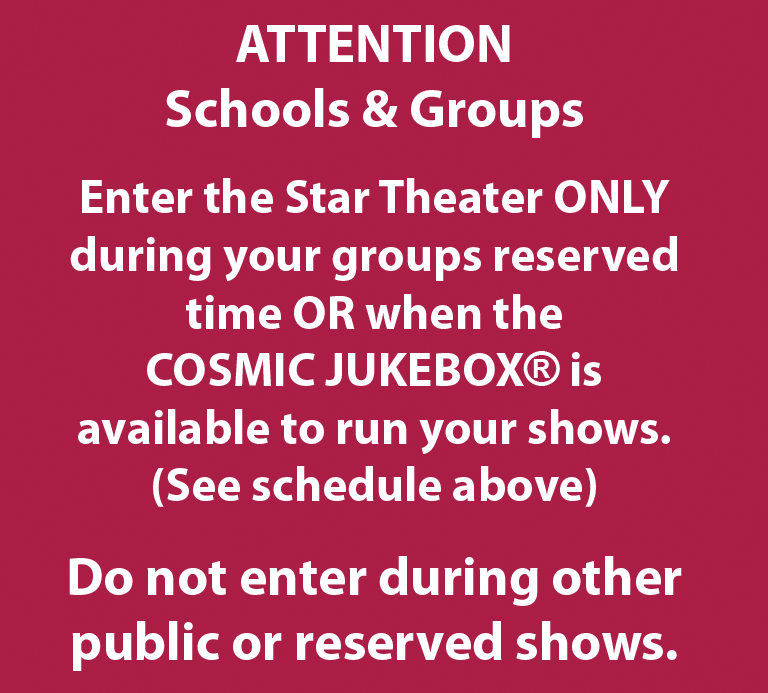
<style>
.page{position:relative;width:768px;height:693px;background:#ab1e46}
.page>*{position:absolute;margin:0}
.t1{font:48px "MyriadPro-Bold";color:#ffffff}
.t2{font:54px "MyriadPro-Bold";color:#ffffff}
.t3{font:48px "Arial-BoldMT";color:#ffffff}
</style>
<div class="page">
<p class="t1" style="left:69px;top:25px;width:613px;height:646px;text-align:center"><span class="t2">ATTENTION<br>Schools &amp; Groups<br><br></span>Enter the Star Theater ONLY<br>during your groups reserved<br>time OR when the<br>COSMIC JUKEBOX<span class="t3">®</span> is<br>available to run your shows.<br>(See schedule above)<br><br><span class="t2">Do not enter during other<br>public or reserved shows.</span></p>
</div>
